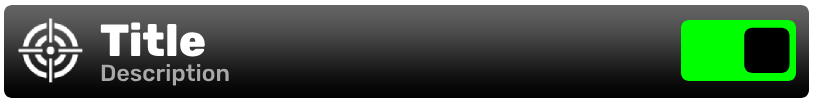
<style>
.page{position:relative;width:815px;height:102px}
.page>*{position:absolute;margin:0}
.t1{font:45px "Rubik-ExtraBold";color:#ffffff}
.t2{font:23.3px "Rubik-Medium";color:#a9a8a8}
</style>
<div class="page">
<p class="t1" style="left:100px;top:22px;width:105px;height:35px">Title</p>
<p class="t2" style="left:101px;top:64px;width:128px;height:22px">Description</p>
</div>
